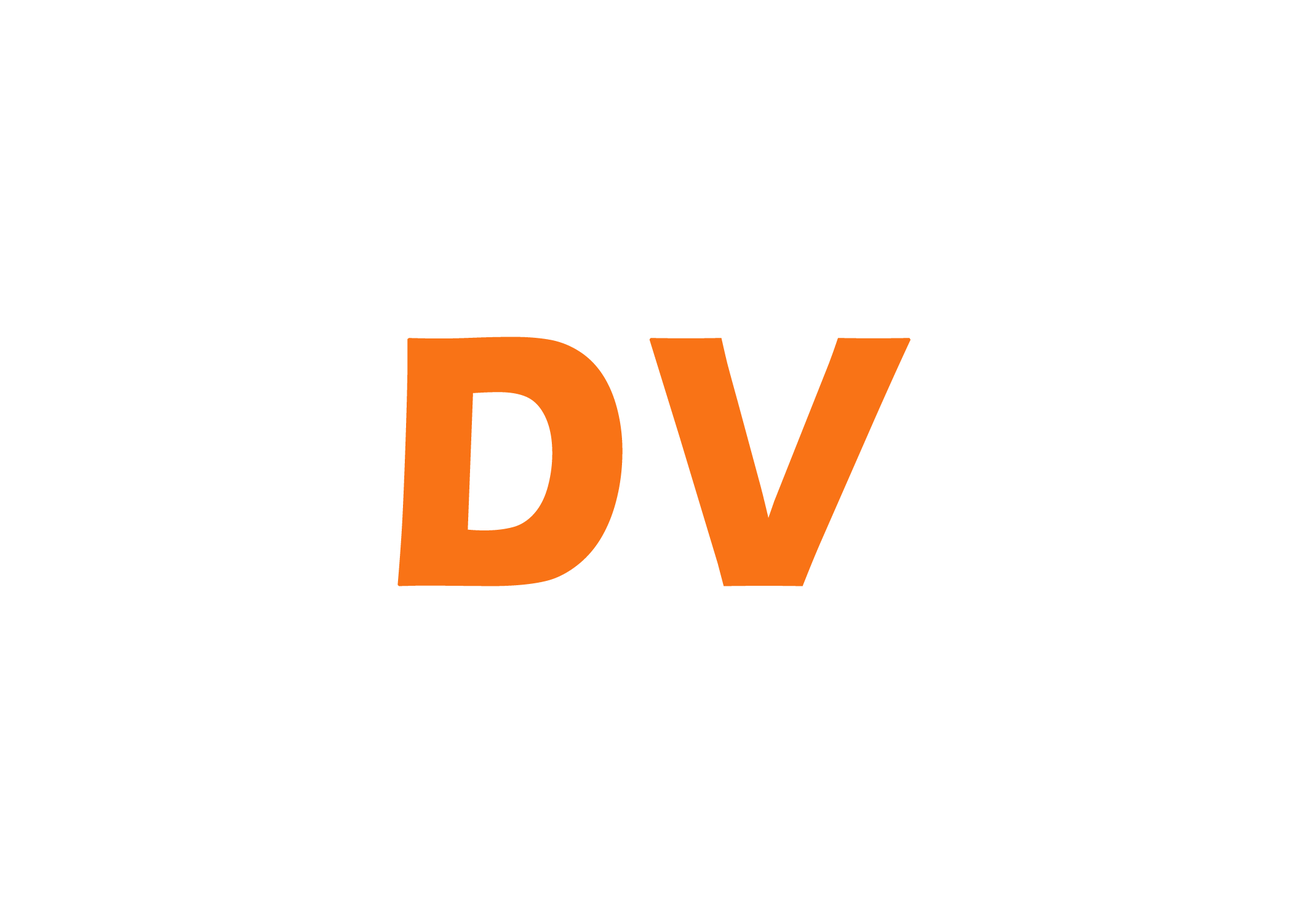
<style>
.page{position:relative;width:1292px;height:923px;background:#ffffff}
.page>*{position:absolute;margin:0}
.t1{font:368.5px "ErasITC-Bold";letter-spacing:0.04em;color:#f97316;font-weight:bold;scale:0.87 1}
</style>
<div class="page">
<p class="t1" style="left:397px;top:337px;width:514px;height:249px">DV</p>
</div>
